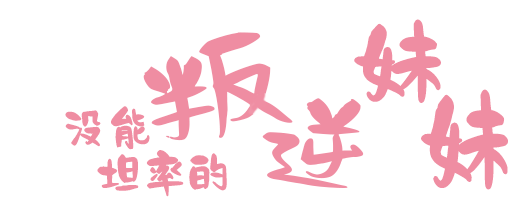
<style>
.page{position:relative;width:530px;height:214px;background:#ffffff}
.page>*{position:absolute;margin:0}
.t1{font:59.1px "AaDingXiangShouShu";color:#ef8da2;font-weight:bold;scale:0.94 1}
.t2{font:68.3px "AaDingXiangShouShu";color:#ef8da2;font-weight:bold;scale:1.34 1}
.t3{font:71px "AaDingXiangShouShu";color:#ef8da2;font-weight:bold;scale:0.78 1}
.t4{font:26px "AaDingXiangShouShu";color:#ef8da2;font-weight:bold}
.t5{font:28px "AaDingXiangShouShu";color:#ef8da2;font-weight:bold;scale:0.94 1}
</style>
<div class="page">
<p class="t1" style="left:354px;top:19px;width:87px;height:84px">妹</p>
<p class="t2" style="left:143px;top:32px;width:131px;height:109px;rotate:-10deg">叛</p>
<p class="t3" style="left:421px;top:89px;width:87px;height:101px">妹</p>
<p class="t4" style="left:65px;top:106px;width:85px;height:44px">没能</p>
<p class="t5" style="left:97px;top:150px;width:130px;height:47px">坦率的</p>
</div>
